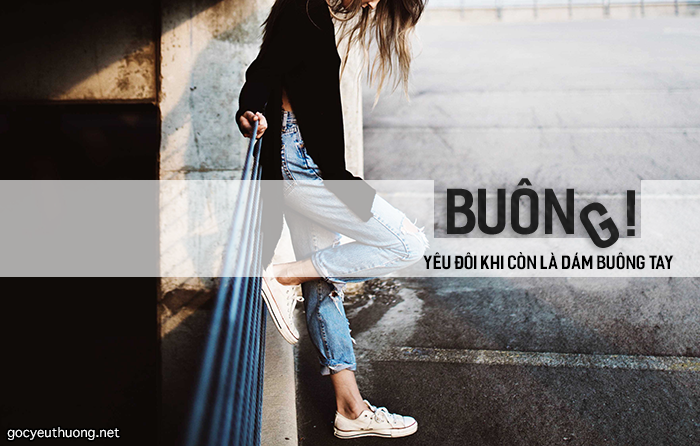
<style>
.page{position:relative;width:700px;height:446px}
.page>*{position:absolute;margin:0}
.t1{font:60.4px "iCielFesterSemiCondensed-Bold";color:#282828}
.t2{font:61px "iCielFesterSemiCondensed-Bold";color:#282828}
.t3{font:18px "iCielFesterSemiCondensed-Bold";color:#000000}
.t4{font:18px "AppleSymbols";color:#ffffff}
</style>
<div class="page">
<p class="t1" style="left:447px;top:178px;width:127px;height:57px">BUÔN</p>
<p class="t2" style="left:627px;top:190px;width:8px;height:46px">!</p>
<p class="t2" style="left:579px;top:202px;width:40px;height:46px;rotate:-30deg">G</p>
<p class="t3" style="left:423px;top:252px;width:251px;height:18px">Yêu đôi khi còn là dám buông tay</p>
<p class="t4" style="left:7px;top:427px;width:113px;height:13px">gocyeuthuong.net</p>
</div>
